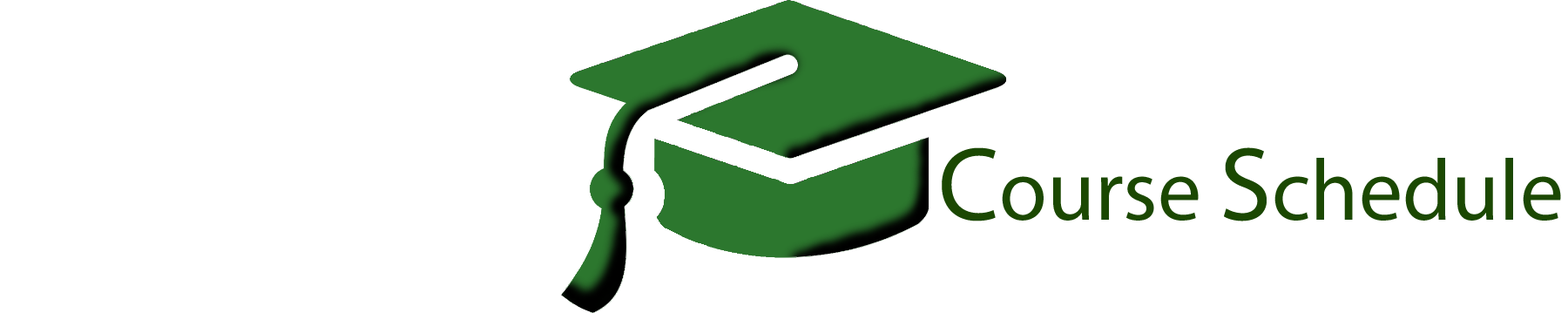
<style>
.page{position:relative;width:1568px;height:313px;background:#ffffff}
.page>*{position:absolute;margin:0}
.t1{font:87.1px "MyriadPro-Regular";color:#1b4802}
.t2{font:104.5px "MyriadPro-Regular";color:#1b4802}
</style>
<div class="page">
<p class="t1" style="left:942px;top:147px;width:619px;height:74px"><span class="t2">C</span>ourse <span class="t2">S</span>chedule</p>
</div>
